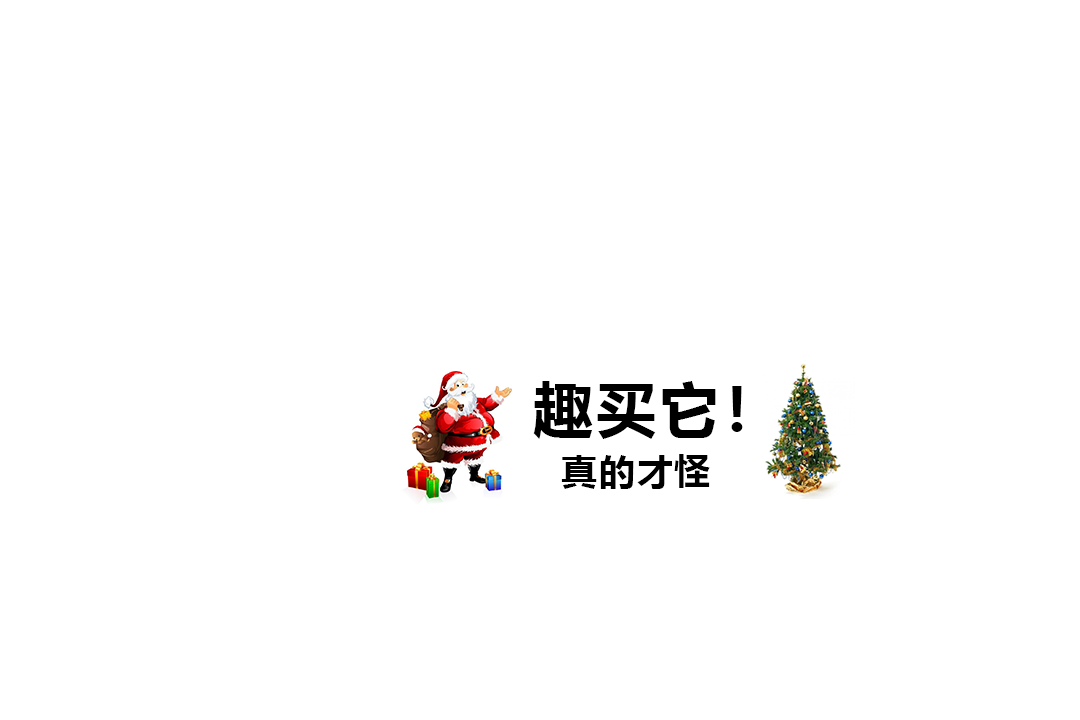
<style>
.page{position:relative;width:1080px;height:720px;background:#ffffff}
.page>*{position:absolute;margin:0}
.t1{font:60px "MicrosoftYaHei-Bold";letter-spacing:0.05em;color:#000000}
.t2{font:36px "MicrosoftYaHei-Bold";letter-spacing:0.05em;color:#000000}
</style>
<div class="page">
<p class="t1" style="left:533px;top:381px;width:210px;height:58px">趣买它！</p>
<p class="t2" style="left:561px;top:454px;width:149px;height:35px">真的才怪</p>
</div>
